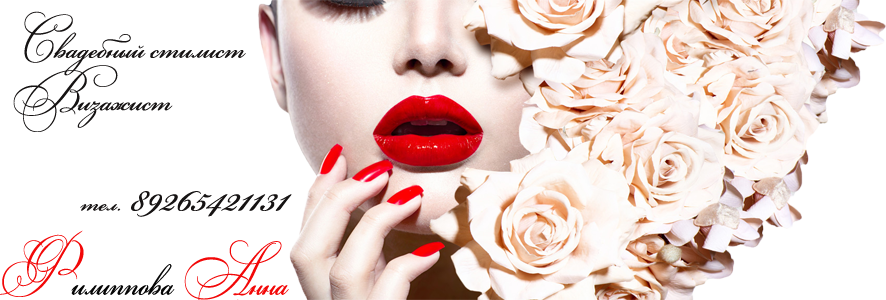
<style>
.page{position:relative;width:886px;height:300px;background:#ffffff}
.page>*{position:absolute;margin:0}
.t1{font:43.7px "BickhamScriptTwo";color:#161313;scale:0.91 1}
.t2{font:14.6px "MyriadPro-Regular";color:#ffffff;scale:0.91 1}
.t3{font:60px "BickhamScriptTwo";color:#161313}
.t4{font:36px "BickhamScriptTwo";color:#161313}
</style>
<div class="page">
<p class="t1" style="left:9px;top:11px;width:237px;height:121px"><span class="t2">ё</span>Свадебный стилист<br>Визажист</p>
<p class="t3" style="left:80px;top:191px;width:212px;height:26px"><span class="t4">тел.</span> 89265421131</p>
</div>
